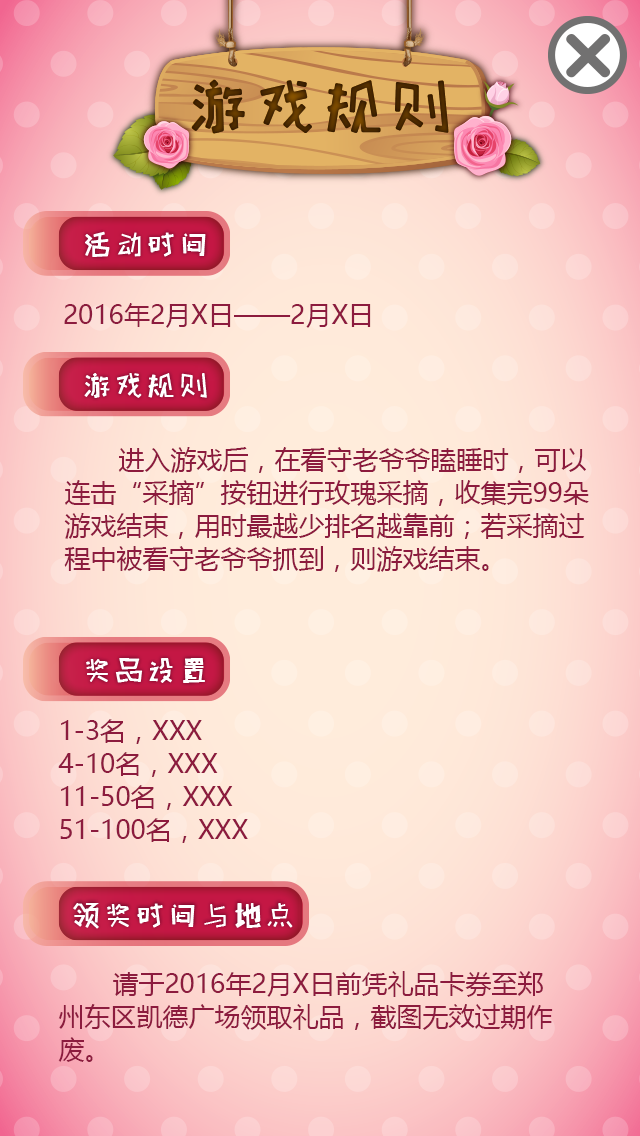
<style>
.page{position:relative;width:640px;height:1136px}
.page>*{position:absolute;margin:0}
.t1{font:26px "MicrosoftYaHei";color:#8c1b3e}
.t2{font:26px/33px "MicrosoftYaHei";color:#8c1b3e}
</style>
<div class="page">
<p class="t1" style="left:64px;top:303px;width:307px;height:25px">2016年2月X日——2月X日</p>
<p class="t2" style="left:64px;top:447px;width:525px;height:125px">进入游戏后，在看守老爷爷瞌睡时，可以连击“采摘”按钮进行玫瑰采摘，收集完99朵游戏结束，用时最越少排名越靠前；若采摘过程中被看守老爷爷抓到，则游戏结束。</p>
<p class="t2" style="left:58px;top:719px;width:190px;height:124px">1-3名，XXX<br>4-10名，XXX<br>11-50名，XXX<br>51-100名，XXX</p>
<p class="t2" style="left:58px;top:971px;width:495px;height:91px">请于2016年2月X日前凭礼品卡券至郑州东区凯德广场领取礼品，截图无效过期作废。</p>
</div>
